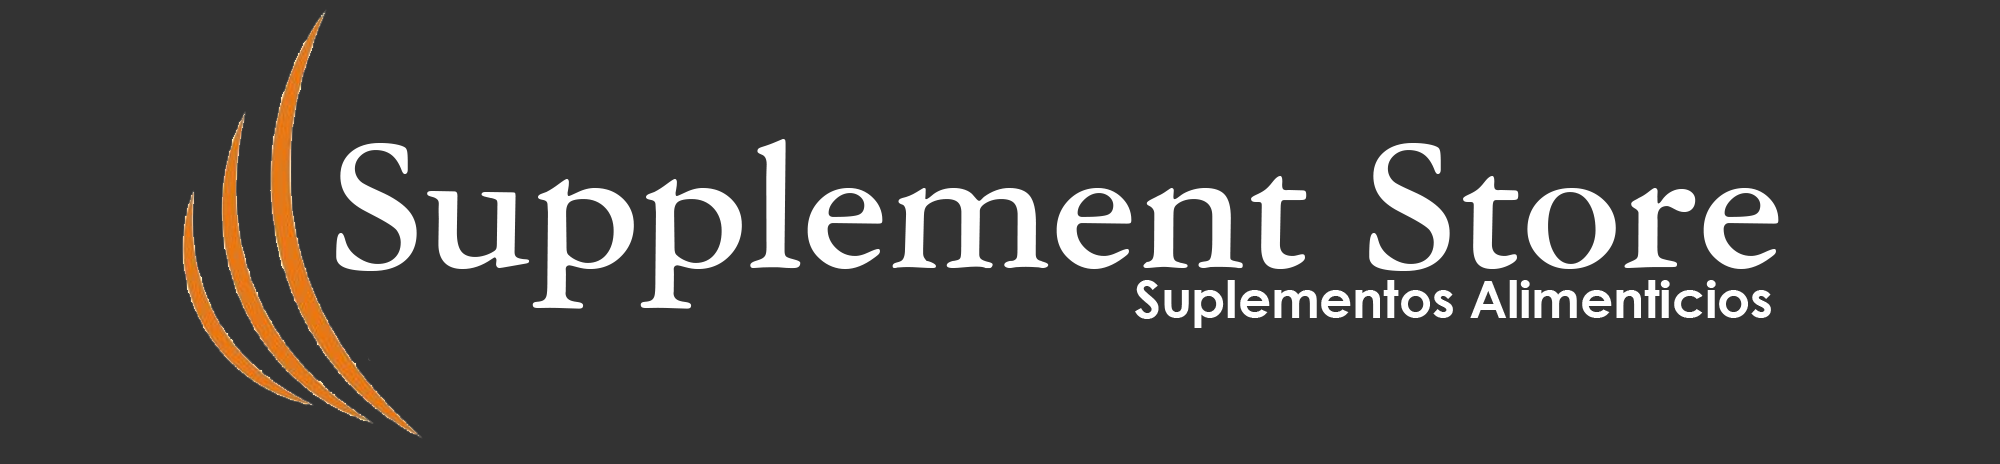
<style>
.page{position:relative;width:2000px;height:464px;background:#333333}
.page>*{position:absolute;margin:0}
.t1{font:11.2px "AmericanGaramondBT-Bold";color:#ffffff}
.t2{font:2.9px "CenturyGothic-Bold";color:#ffffff}
</style>
<div class="page">
<p class="t1" style="left:336px;top:139px;width:1443px;height:170px">Supplement Store</p>
<p class="t2" style="left:1135px;top:280px;width:636px;height:48px">Suplementos Alimenticios</p>
</div>
